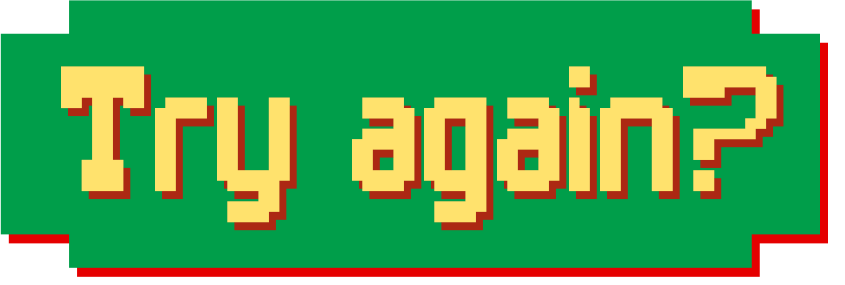
<style>
.page{position:relative;width:845px;height:285px;background:#009e4a}
.page>*{position:absolute;margin:0}
.t1{font:165.8px "Bandit";color:#ffe26d}
</style>
<div class="page">
<p class="t1" style="left:61px;top:66px;width:716px;height:157px">Try again?</p>
</div>
